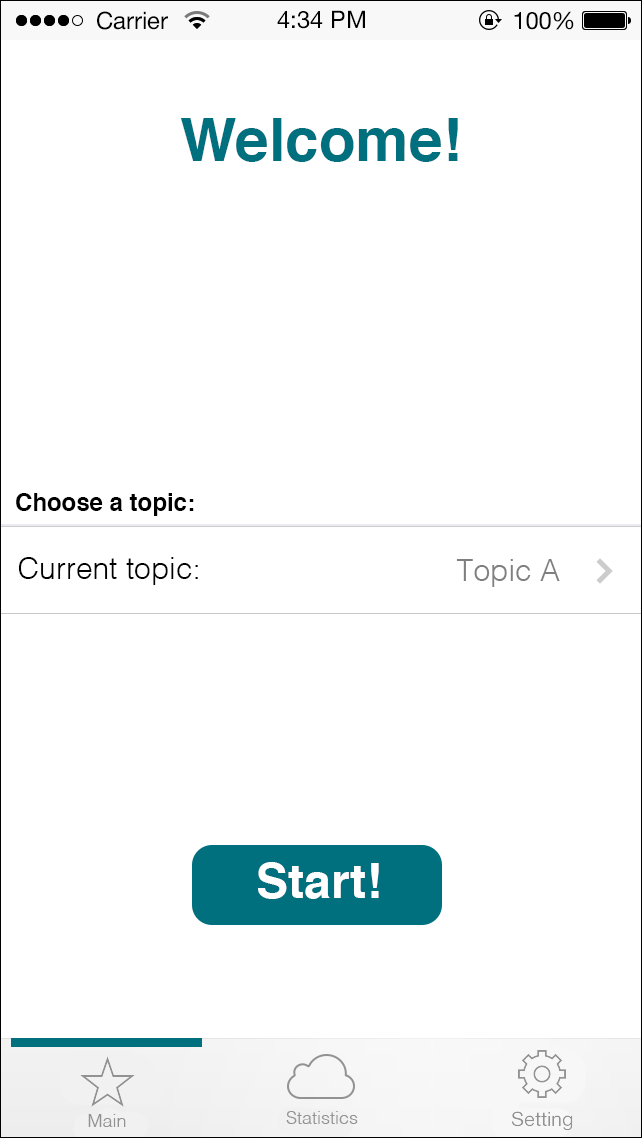
<style>
.page{position:relative;width:642px;height:1138px;background:#ffffff}
.page>*{position:absolute;margin:0}
.t1{font:60px "Helvetica-Bold";color:#00707f}
.t2{font:24px "Helvetica-Bold";color:#000000}
.t3{font:30px "Helvetica-Light";color:#000000}
.t4{font:30px "Helvetica-Light";color:#7f7f7f}
.t5{font:48px "Helvetica-Bold";color:#ffffff}
.t6{font:18px "Helvetica-Light";color:#929292}
</style>
<div class="page">
<p class="t1" style="left:181px;top:118px;width:277px;height:44px">Welcome!</p>
<p class="t2" style="left:16px;top:493px;width:178px;height:23px">Choose a topic:</p>
<p class="t3" style="left:18px;top:557px;width:180px;height:28px">Current topic:</p>
<p class="t4" style="left:456px;top:559px;width:104px;height:28px">Topic A</p>
<p class="t5" style="left:258px;top:862px;width:121px;height:37px">Start!</p>
<p class="t6" style="left:88px;top:1114px;width:38px;height:13px">Main</p>
<p class="t6" style="left:286px;top:1111px;width:72px;height:13px">Statistics</p>
</div>
